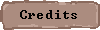
<style>
.page{position:relative;width:100px;height:30px;background:#ab8c7f}
.page>*{position:absolute;margin:0}
.t1{font:13px "Terminal";letter-spacing:0.04em;color:#000000}
</style>
<div class="page">
<p class="t1" style="left:20px;top:10px;width:57px;height:9px">Credits</p>
</div>
